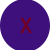
<style>
.page{position:relative;width:50px;height:50px;background:#3d107b}
.page>*{position:absolute;margin:0}
.t1{font:28.8px "ArialMT";color:#6e0023;scale:0.83 1}
</style>
<div class="page">
<p class="t1" style="left:20px;top:18px;width:12px;height:15px">x</p>
</div>
